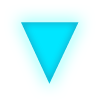
<style>
.page{position:relative;width:100px;height:100px;background:#ffffff}
.page>*{position:absolute;margin:0}
.t1{font:75.2px "Meiryo";color:#02dff9;scale:1.25 1}
</style>
<div class="page">
<p class="t1" style="left:21px;top:22px;width:58px;height:62px;rotate:-90deg">◀</p>
</div>
